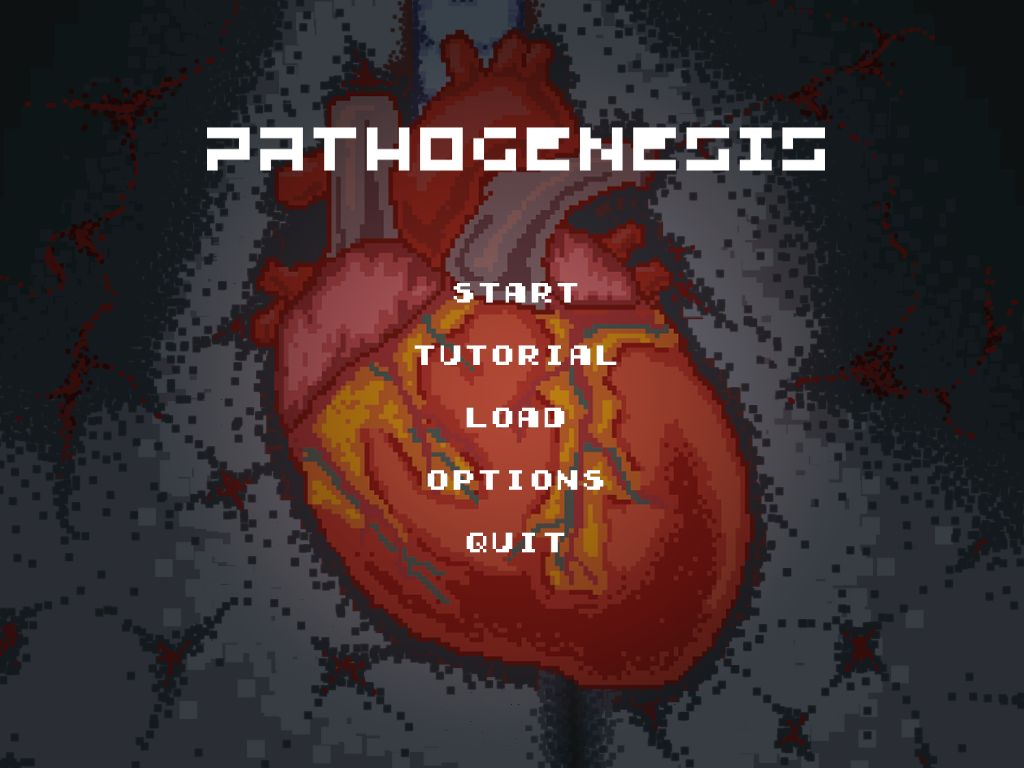
<style>
.page{position:relative;width:1024px;height:768px}
.page>*{position:absolute;margin:0}
.t1{font:26px "Early-GameBoy";color:#ffffff}
</style>
<div class="page">
<p class="t1" style="left:414px;top:283px;width:203px;height:270px;text-align:center">start<br><br>tutorial<br><br>load<br><br>options<br><br>quit</p>
</div>
